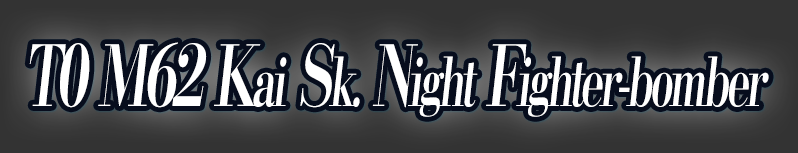
<style>
.page{position:relative;width:798px;height:153px}
.page>*{position:absolute;margin:0}
.t1{font:67.2px "KochoStd-Heavy";letter-spacing:-0.08em;color:#ffffff;font-style:italic;scale:0.63 1}
.t2{font:84px "KochoStd-Heavy";letter-spacing:-0.08em;color:#ffffff;font-style:italic;scale:0.63 1}
</style>
<div class="page">
<p class="t1" style="left:29px;top:42px;width:740px;height:75px"><span class="t2">T0 M62 K</span>ai<span class="t2"> S</span>k.<span class="t2"> N</span>ight<span class="t2"> F</span>ighter-bomber</p>
</div>
